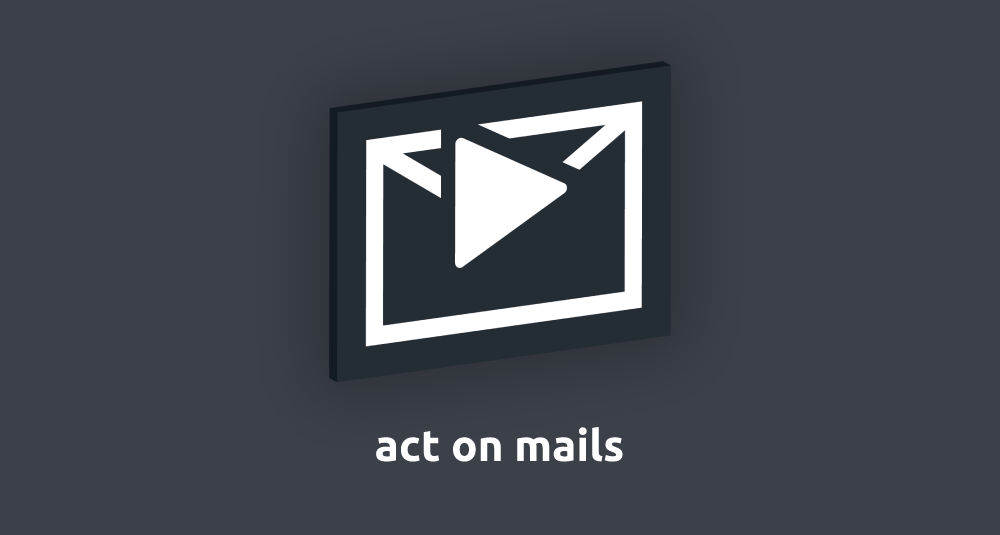
<style>
.page{position:relative;width:1000px;height:535px;background:#3c4049}
.page>*{position:absolute;margin:0}
.t1{font:44px "Ubuntu-Bold";color:#ffffff}
</style>
<div class="page">
<p class="t1" style="left:376px;top:426px;width:247px;height:36px">act on mails</p>
</div>
